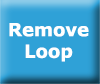
<style>
.page{position:relative;width:100px;height:84px;background:#2fa1d7}
.page>*{position:absolute;margin:0}
.t1{font:18px "Verdana-Bold";color:#ffffff}
</style>
<div class="page">
<p class="t1" style="left:9px;top:23px;width:80px;height:39px;text-align:center">Remove<br>Loop</p>
</div>
